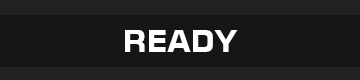
<style>
.page{position:relative;width:360px;height:80px;background:#161616}
.page>*{position:absolute;margin:0}
.t1{font:30px "Moire-Bold";color:#ffffff}
</style>
<div class="page">
<p class="t1" style="left:125px;top:30px;width:113px;height:22px">READY</p>
</div>
